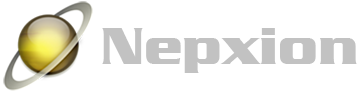
<style>
.page{position:relative;width:362px;height:91px;background:#ffffff}
.page>*{position:absolute;margin:0}
.t1{font:53.3px "SerpentineD-Bold";color:#c2c2c2}
</style>
<div class="page">
<p class="t1" style="left:102px;top:28px;width:255px;height:45px">Nepxion</p>
</div>
